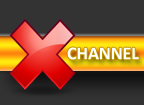
<style>
.page{position:relative;width:144px;height:105px;background:#333333}
.page>*{position:absolute;margin:0}
.t1{font:18px "Calibri-Bold";color:#ffffff}
</style>
<div class="page">
<p class="t1" style="left:67px;top:47px;width:72px;height:13px">CHANNEL</p>
</div>
